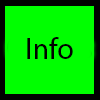
<style>
.page{position:relative;width:100px;height:100px;background:#00ff00}
.page>*{position:absolute;margin:0}
.t1{font:30px "MyriadPro-Regular";color:#000000}
</style>
<div class="page">
<p class="t1" style="left:27px;top:37px;width:46px;height:22px">Info</p>
</div>
